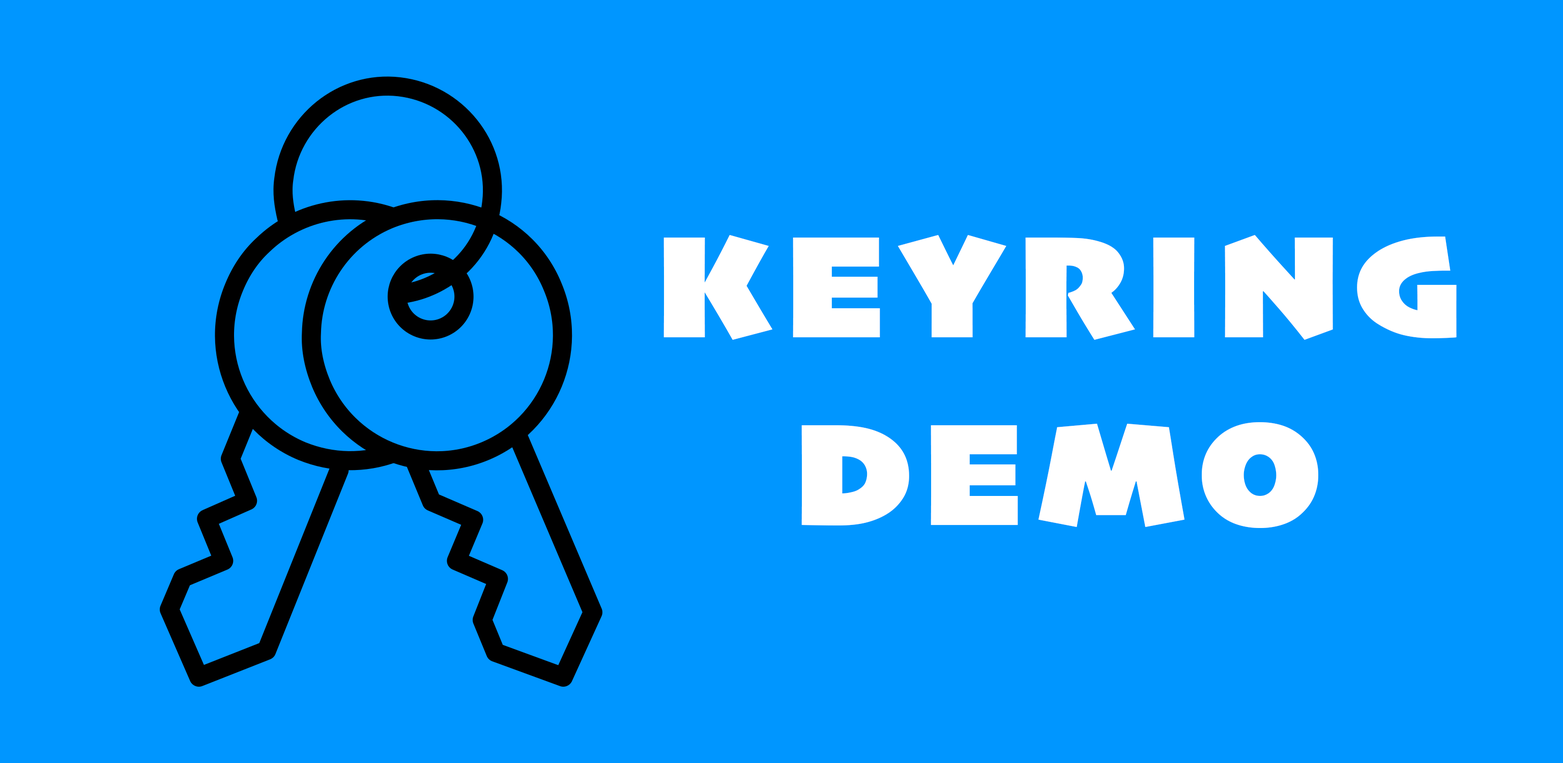
<style>
.page{position:relative;width:1563px;height:763px;background:#0096ff}
.page>*{position:absolute;margin:0}
.t1{font:152.6px "Skia-Black";letter-spacing:0.1em;color:#ffffff}
</style>
<div class="page">
<p class="t1" style="left:663px;top:235px;width:793px;height:105px">KEYRING</p>
<p class="t1" style="left:801px;top:422px;width:517px;height:106px">DEMO</p>
</div>
